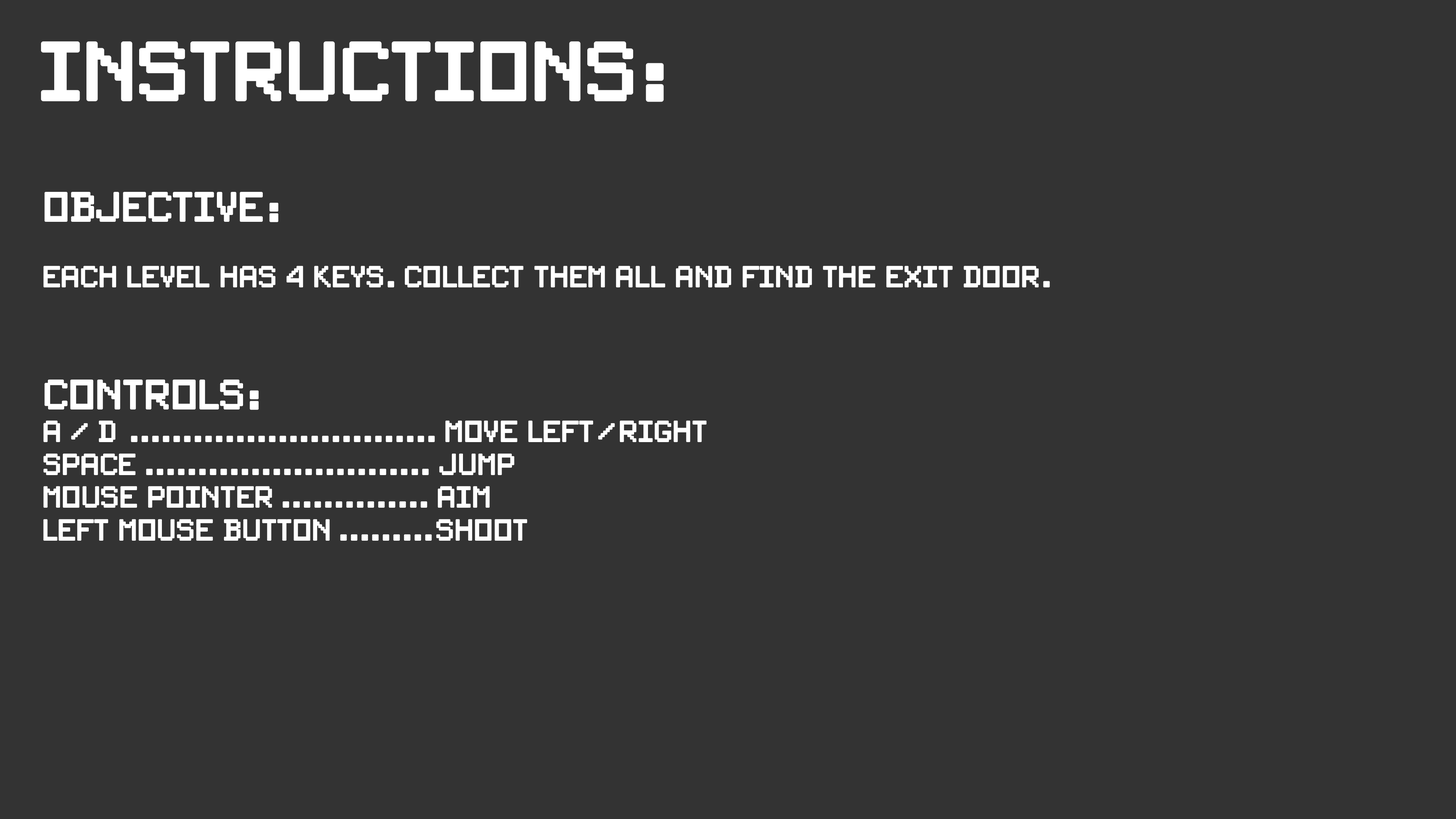
<style>
.page{position:relative;width:1456px;height:819px;background:#333333}
.page>*{position:absolute;margin:0}
.t1{font:75.8px "PixelSplitter-Bold";color:#ffffff}
.t2{font:27.3px "PixelSplitter-Bold";color:#ffffff}
.t3{font:37.9px "PixelSplitter-Bold";color:#ffffff}
</style>
<div class="page">
<p class="t1" style="left:41px;top:41px;width:623px;height:61px">Instructions:</p>
<p class="t2" style="left:43px;top:192px;width:1007px;height:95px"><span class="t3">Objective:<br></span><br>each level has 4 keys. Collect them all and find the exit door.</p>
<p class="t2" style="left:43px;top:380px;width:664px;height:161px"><span class="t3">Controls:<br></span>A / D  ............................. MOve Left/Right<br>Space ........................... Jump<br>Mouse Pointer .............. Aim<br>Left Mouse Button .........Shoot</p>
</div>
